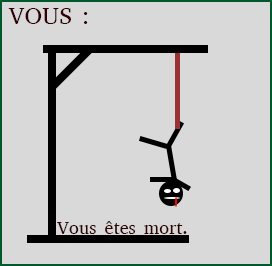
<style>
.page{position:relative;width:272px;height:266px;background:#d9d9d9}
.page>*{position:absolute;margin:0}
.t1{font:24px "AbyssinicaSIL";color:#330000}
.t2{font:18.1px "AbyssinicaSIL";color:#330000}
</style>
<div class="page">
<p class="t1" style="left:8px;top:8px;width:80px;height:16px">VOUS :</p>
<p class="t2" style="left:57px;top:221px;width:130px;height:13px">Vous êtes mort.</p>
</div>
